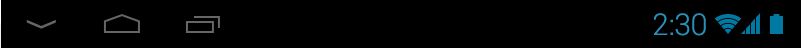
<style>
.page{position:relative;width:801px;height:48px;background:#000000}
.page>*{position:absolute;margin:0}
.t1{font:30px "Roboto-Light";color:#2991b7}
</style>
<div class="page">
<p class="t1" style="left:654px;top:13px;width:52px;height:23px">2:30</p>
</div>
